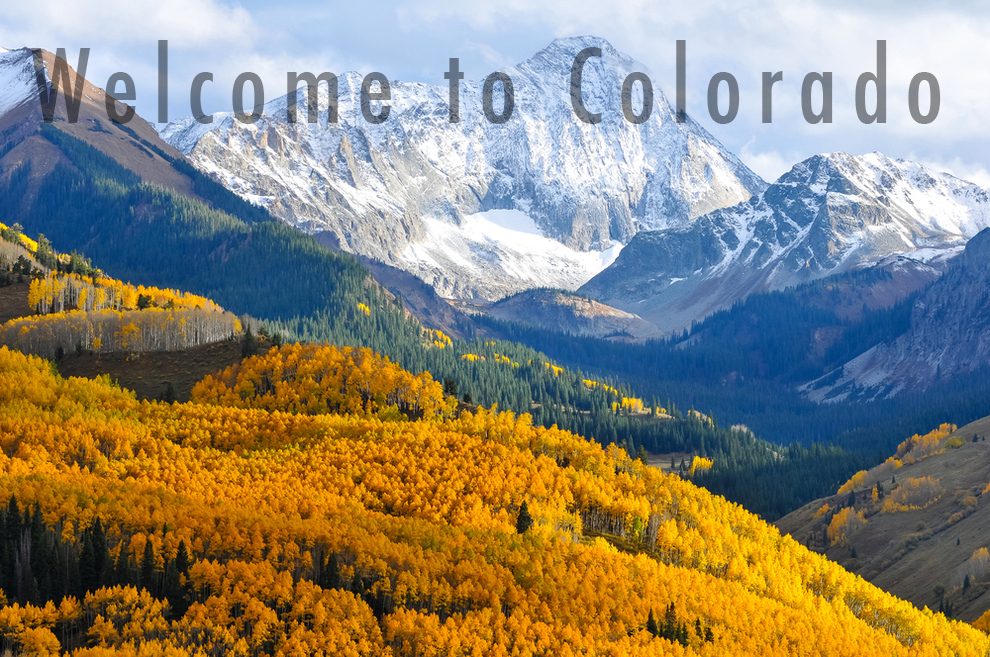
<style>
.page{position:relative;width:990px;height:657px}
.page>*{position:absolute;margin:0}
.t1{font:100px "Futura-CondensedMedium";letter-spacing:0.14em}
</style>
<div class="page">
<p class="t1" style="left:31px;top:40px;width:910px;height:84px">Welcome to Colorado</p>
</div>
